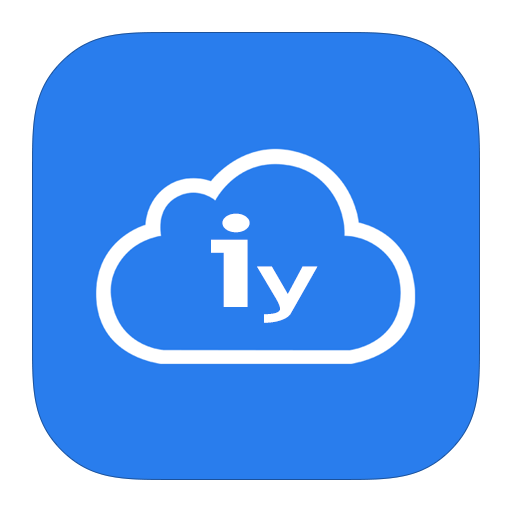
<style>
.page{position:relative;width:512px;height:512px;background:#297ded}
.page>*{position:absolute;margin:0}
.t1{font:128px "TrebuchetMS-Bold";letter-spacing:-0.025em;color:#ffffff;scale:1.48 1}
.t2{font:76.8px "TrebuchetMS-Bold";letter-spacing:-0.025em;color:#ffffff;scale:1.48 1}
</style>
<div class="page">
<p class="t1" style="left:211px;top:213px;width:107px;height:110px">i<span class="t2">y</span></p>
</div>
